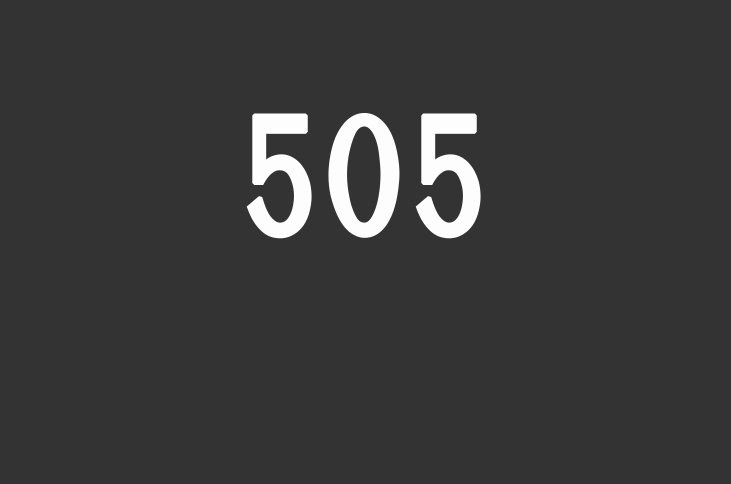
<style>
.page{position:relative;width:731px;height:484px;background:#333333}
.page>*{position:absolute;margin:0}
.t1{font:144px "HGSSoeiPresenceEB";color:#fdfdfd;font-weight:bold}
</style>
<div class="page">
<p class="t1" style="left:246px;top:112px;width:235px;height:127px">505</p>
</div>
